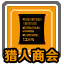
<style>
.page{position:relative;width:64px;height:64px}
.page>*{position:absolute;margin:0}
.t1{font:13px "HYWenHei-HEW";letter-spacing:0.045em;color:#f19602}
</style>
<div class="page">
<p class="t1" style="left:4px;top:49px;width:55px;height:13px">猎人商会</p>
</div>
